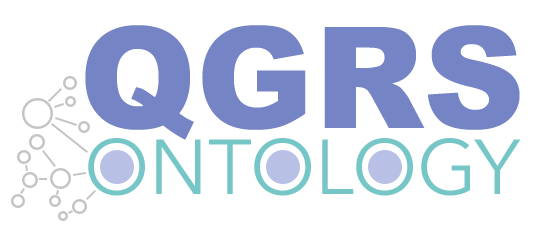
<style>
.page{position:relative;width:542px;height:232px;background:#ffffff}
.page>*{position:absolute;margin:0}
.t1{font:141px "Arial-Black";color:#7584c5}
.t2{font:77px "AvenirNext-Regular";color:#76c6c7;text-transform:uppercase}
</style>
<div class="page">
<p class="t1" style="left:85px;top:25px;width:435px;height:115px">QGRS</p>
<p class="t2" style="left:88px;top:138px;width:433px;height:58px">ontology</p>
</div>
